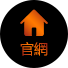
<style>
.page{position:relative;width:68px;height:68px;background:#000000}
.page>*{position:absolute;margin:0}
.t1{font:14px "MicrosoftYaHei"}
</style>
<div class="page">
<p class="t1" style="left:20px;top:42px;width:28px;height:14px">官網</p>
</div>
